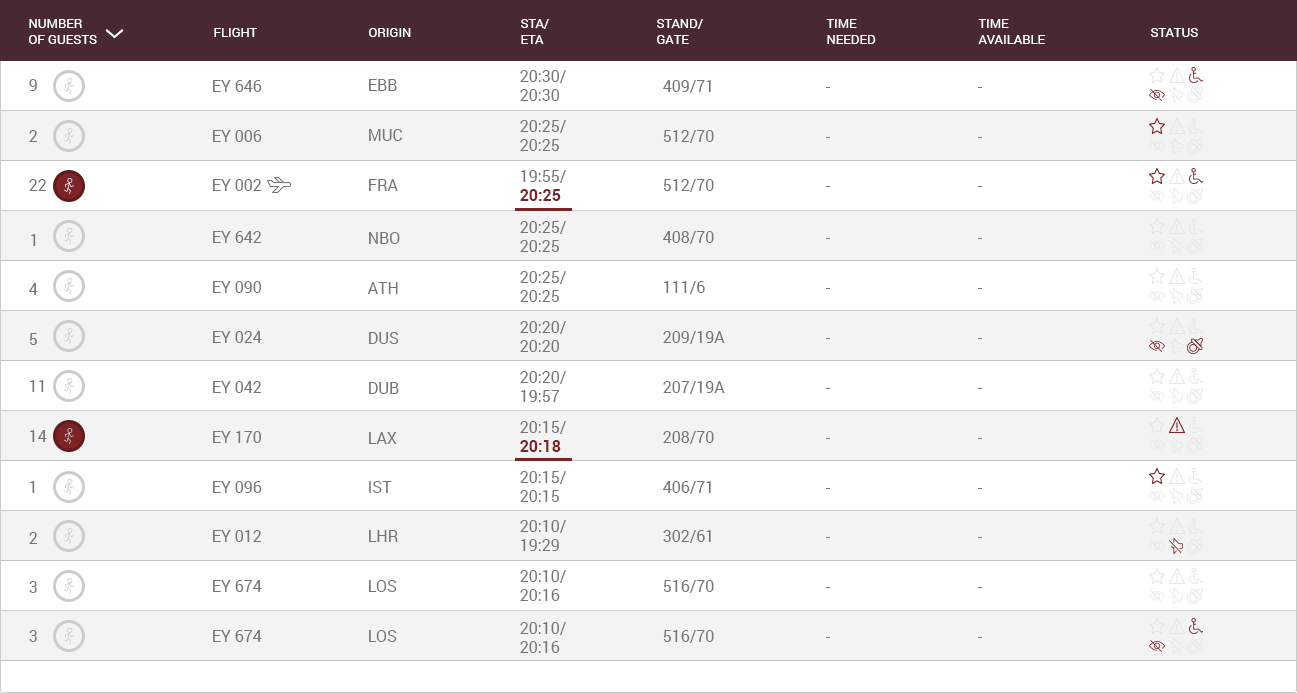
<style>
.page{position:relative;width:1297px;height:693px;background:#ffffff}
.page>*{position:absolute;margin:0}
.t1{font:13px "Roboto-Regular";color:#ffffff;text-transform:uppercase}
.t2{font:16px "Roboto-Regular";color:#767676}
.t3{font:16px "Roboto-Bold";color:#7b2326}
</style>
<div class="page">
<p class="t1" style="left:29px;top:19px;width:68px;height:25px">Number<br>of Guests</p>
<p class="t1" style="left:214px;top:28px;width:43px;height:9px">Flight</p>
<p class="t1" style="left:369px;top:28px;width:42px;height:9px">Origin</p>
<p class="t1" style="left:521px;top:19px;width:28px;height:25px">STA/<br>ETA</p>
<p class="t1" style="left:657px;top:19px;width:46px;height:25px">Stand/<br>Gate</p>
<p class="t1" style="left:826px;top:19px;width:50px;height:25px">Time<br>Needed</p>
<p class="t1" style="left:978px;top:19px;width:67px;height:25px">Time<br>Available</p>
<p class="t1" style="left:1151px;top:28px;width:47px;height:9px">Status</p>
<p class="t2" style="left:520px;top:70px;width:46px;height:31px">20:30/<br>20:30</p>
<p class="t2" style="left:29px;top:79px;width:8px;height:12px">9</p>
<p class="t2" style="left:213px;top:80px;width:49px;height:12px">EY 646</p>
<p class="t2" style="left:369px;top:79px;width:28px;height:12px">EBB</p>
<p class="t2" style="left:663px;top:80px;width:48px;height:13px">409/71</p>
<p class="t2" style="left:825px;top:87px;width:5px;height:1px">-</p>
<p class="t2" style="left:977px;top:87px;width:5px;height:1px">-</p>
<p class="t2" style="left:520px;top:120px;width:46px;height:31px">20:25/<br>20:25</p>
<p class="t2" style="left:29px;top:130px;width:9px;height:12px">2</p>
<p class="t2" style="left:213px;top:130px;width:49px;height:12px">EY 006</p>
<p class="t2" style="left:369px;top:129px;width:33px;height:12px">MUC</p>
<p class="t2" style="left:663px;top:130px;width:51px;height:13px">512/70</p>
<p class="t2" style="left:825px;top:137px;width:5px;height:1px">-</p>
<p class="t2" style="left:977px;top:137px;width:5px;height:1px">-</p>
<p class="t2" style="left:520px;top:170px;width:46px;height:31px">19:55/<br><span class="t3">20:25</span></p>
<p class="t2" style="left:29px;top:179px;width:18px;height:12px">22</p>
<p class="t2" style="left:213px;top:179px;width:49px;height:12px">EY 002</p>
<p class="t2" style="left:369px;top:179px;width:29px;height:12px">FRA</p>
<p class="t2" style="left:663px;top:179px;width:51px;height:13px">512/70</p>
<p class="t2" style="left:825px;top:186px;width:5px;height:1px">-</p>
<p class="t2" style="left:977px;top:186px;width:5px;height:1px">-</p>
<p class="t2" style="left:520px;top:221px;width:46px;height:31px">20:25/<br>20:25</p>
<p class="t2" style="left:213px;top:231px;width:49px;height:12px">EY 642</p>
<p class="t2" style="left:369px;top:232px;width:31px;height:12px">NBO</p>
<p class="t2" style="left:663px;top:231px;width:51px;height:13px">408/70</p>
<p class="t2" style="left:31px;top:234px;width:5px;height:12px">1</p>
<p class="t2" style="left:825px;top:238px;width:5px;height:1px">-</p>
<p class="t2" style="left:977px;top:238px;width:5px;height:1px">-</p>
<p class="t2" style="left:213px;top:281px;width:48px;height:12px">EY 090</p>
<p class="t2" style="left:520px;top:271px;width:46px;height:31px">20:25/<br>20:25</p>
<p class="t2" style="left:664px;top:281px;width:41px;height:13px">111/6</p>
<p class="t2" style="left:29px;top:283px;width:9px;height:12px">4</p>
<p class="t2" style="left:367px;top:282px;width:31px;height:12px">ATH</p>
<p class="t2" style="left:825px;top:288px;width:5px;height:1px">-</p>
<p class="t2" style="left:977px;top:288px;width:5px;height:1px">-</p>
<p class="t2" style="left:520px;top:321px;width:46px;height:31px">20:20/<br>20:20</p>
<p class="t2" style="left:29px;top:333px;width:8px;height:12px">5</p>
<p class="t2" style="left:213px;top:331px;width:49px;height:12px">EY 024</p>
<p class="t2" style="left:369px;top:332px;width:30px;height:12px">DUS</p>
<p class="t2" style="left:663px;top:331px;width:62px;height:13px">209/19A</p>
<p class="t2" style="left:825px;top:338px;width:5px;height:1px">-</p>
<p class="t2" style="left:977px;top:338px;width:5px;height:1px">-</p>
<p class="t2" style="left:520px;top:371px;width:46px;height:31px">20:20/<br>19:57</p>
<p class="t2" style="left:30px;top:380px;width:14px;height:12px">11</p>
<p class="t2" style="left:213px;top:381px;width:49px;height:12px">EY 042</p>
<p class="t2" style="left:369px;top:382px;width:30px;height:12px">DUB</p>
<p class="t2" style="left:663px;top:381px;width:62px;height:13px">207/19A</p>
<p class="t2" style="left:825px;top:388px;width:5px;height:1px">-</p>
<p class="t2" style="left:977px;top:388px;width:5px;height:1px">-</p>
<p class="t2" style="left:520px;top:421px;width:46px;height:31px">20:15/<br><span class="t3">20:18</span></p>
<p class="t2" style="left:30px;top:430px;width:17px;height:12px">14</p>
<p class="t2" style="left:213px;top:431px;width:48px;height:12px">EY 170</p>
<p class="t2" style="left:369px;top:432px;width:28px;height:12px">LAX</p>
<p class="t2" style="left:663px;top:431px;width:51px;height:13px">208/70</p>
<p class="t2" style="left:825px;top:438px;width:5px;height:1px">-</p>
<p class="t2" style="left:977px;top:438px;width:5px;height:1px">-</p>
<p class="t2" style="left:520px;top:471px;width:46px;height:31px">20:15/<br>20:15</p>
<p class="t2" style="left:30px;top:481px;width:5px;height:12px">1</p>
<p class="t2" style="left:213px;top:481px;width:49px;height:12px">EY 096</p>
<p class="t2" style="left:369px;top:481px;width:23px;height:12px">IST</p>
<p class="t2" style="left:663px;top:481px;width:48px;height:13px">406/71</p>
<p class="t2" style="left:825px;top:488px;width:5px;height:1px">-</p>
<p class="t2" style="left:977px;top:488px;width:5px;height:1px">-</p>
<p class="t2" style="left:520px;top:520px;width:46px;height:31px">20:10/<br>19:29</p>
<p class="t2" style="left:29px;top:532px;width:9px;height:12px">2</p>
<p class="t2" style="left:213px;top:530px;width:49px;height:12px">EY 012</p>
<p class="t2" style="left:369px;top:530px;width:29px;height:12px">LHR</p>
<p class="t2" style="left:663px;top:530px;width:48px;height:13px">302/61</p>
<p class="t2" style="left:825px;top:537px;width:5px;height:1px">-</p>
<p class="t2" style="left:977px;top:537px;width:5px;height:1px">-</p>
<p class="t2" style="left:29px;top:581px;width:8px;height:12px">3</p>
<p class="t2" style="left:213px;top:580px;width:49px;height:12px">EY 674</p>
<p class="t2" style="left:369px;top:580px;width:28px;height:12px">LOS</p>
<p class="t2" style="left:520px;top:570px;width:46px;height:31px">20:10/<br>20:16</p>
<p class="t2" style="left:663px;top:580px;width:51px;height:13px">516/70</p>
<p class="t2" style="left:825px;top:587px;width:5px;height:1px">-</p>
<p class="t2" style="left:977px;top:587px;width:5px;height:1px">-</p>
<p class="t2" style="left:29px;top:630px;width:8px;height:12px">3</p>
<p class="t2" style="left:213px;top:630px;width:49px;height:12px">EY 674</p>
<p class="t2" style="left:369px;top:630px;width:28px;height:12px">LOS</p>
<p class="t2" style="left:520px;top:622px;width:46px;height:31px">20:10/<br>20:16</p>
<p class="t2" style="left:663px;top:630px;width:51px;height:13px">516/70</p>
<p class="t2" style="left:825px;top:637px;width:5px;height:1px">-</p>
<p class="t2" style="left:977px;top:637px;width:5px;height:1px">-</p>
</div>
